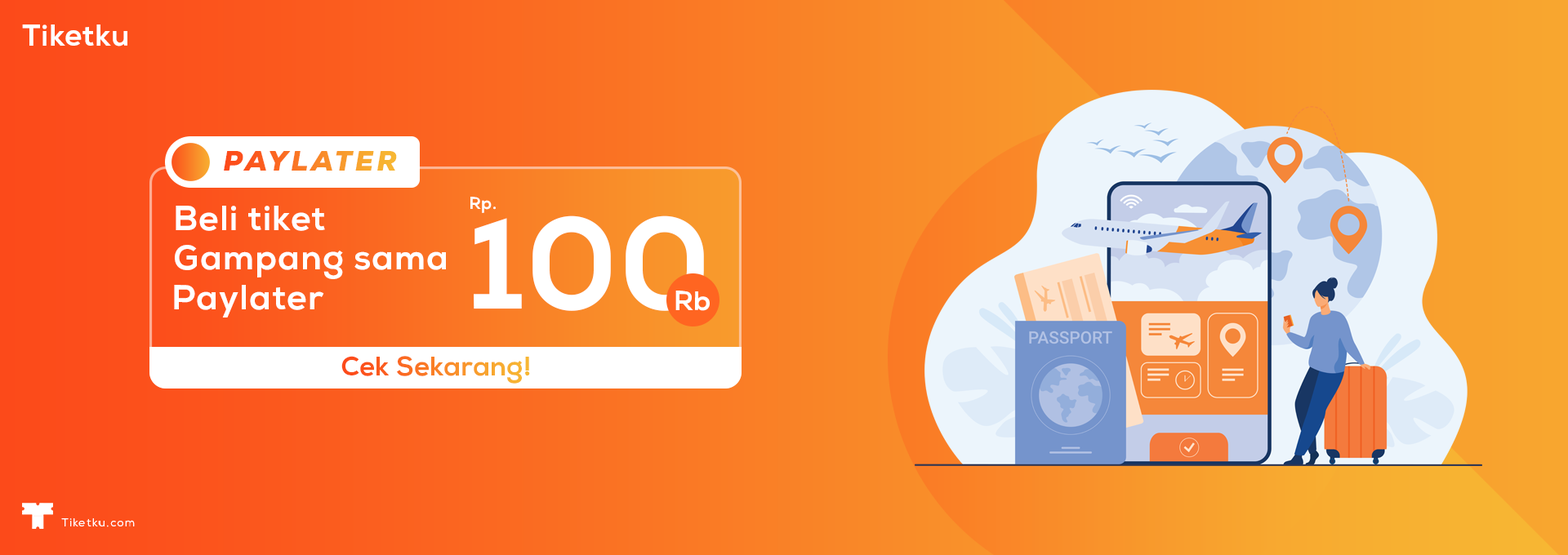
<style>
.page{position:relative;width:1568px;height:555px}
.page>*{position:absolute;margin:0}
.t1{font:30px "Nexa-XBold";letter-spacing:0.01em;color:#ffffff}
.t2{font:27.7px "Nexa-BlackItalic";letter-spacing:0.1em;text-transform:uppercase}
.t3{font:16.7px "Nexa-XBold";letter-spacing:0.025em;color:#ffffff}
.t4{font:34.6px "Nexa-XBold";letter-spacing:0.025em;color:#ffffff}
.t5{font:129px "Nexa-XBold";letter-spacing:0.01em;color:#ffffff}
.t6{font:27px "Nexa-XBold";letter-spacing:0.01em;color:#ffffff}
.t7{font:26.8px "Nexa-XBold";letter-spacing:0.01em}
.t8{font:11.1px "Nexa-Book";letter-spacing:0.1em;color:#ffffff}
</style>
<div class="page">
<p class="t1" style="left:22px;top:24px;width:105px;height:23px">Tiketku</p>
<p class="t2" style="left:224px;top:151px;width:173px;height:20px">Paylater</p>
<p class="t3" style="left:470px;top:197px;width:26px;height:16px">Rp.</p>
<p class="t4" style="left:176px;top:206px;width:149px;height:25px">Beli tiket</p>
<p class="t5" style="left:474px;top:216px;width:230px;height:95px">100</p>
<p class="t4" style="left:175px;top:245px;width:271px;height:34px">Gampang sama</p>
<p class="t4" style="left:174px;top:285px;width:150px;height:33px">Paylater</p>
<p class="t6" style="left:675px;top:291px;width:35px;height:20px">Rb</p>
<p class="t7" style="left:341px;top:356px;width:189px;height:28px">Cek Sekarang!</p>
<p class="t8" style="left:61px;top:519px;width:74px;height:9px">Tiketku.com</p>
</div>
